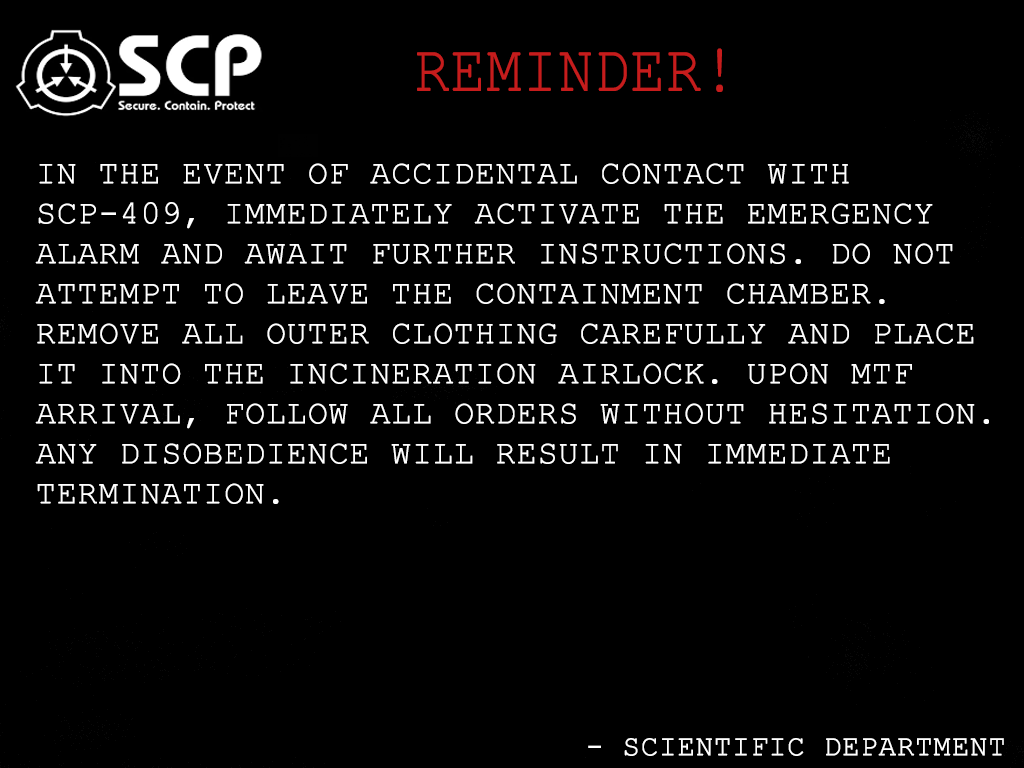
<style>
.page{position:relative;width:1024px;height:768px;background:#000000}
.page>*{position:absolute;margin:0}
.t1{font:66.7px "CourierNewPSMT";color:#c61c1c;text-transform:uppercase;font-weight:bold;scale:0.86 1}
.t2{font:33.3px "CourierNewPSMT";color:#ffffff;text-transform:uppercase;font-weight:bold}
.t3{font:29.2px "CourierNewPSMT";color:#ffffff;text-transform:uppercase;font-weight:bold}
</style>
<div class="page">
<p class="t1" style="left:417px;top:48px;width:306px;height:44px">Reminder!</p>
<p class="t2" style="left:35px;top:163px;width:954px;height:341px;text-align:justify"><span class="t3"><br></span>In the event of accidental contact with SCP-409, immediately activate the emergency alarm and await further instructions. Do not attempt to leave the containment chamber. Remove all outer clothing carefully and place it into the incineration airlock. Upon MTF arrival, follow all orders without hesitation. Any disobedience will result in immediate termination.</p>
<p class="t3" style="left:588px;top:738px;width:416px;height:18px">- SCIENTIFIC DEPARTMENT</p>
</div>
